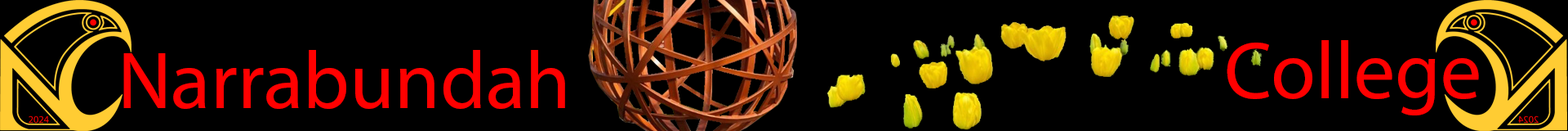
<style>
.page{position:relative;width:1568px;height:131px;background:#000000}
.page>*{position:absolute;margin:0}
.t1{font:81.7px "MyriadPro-Regular";color:#ff0000}
</style>
<div class="page">
<p class="t1" style="left:1227px;top:40px;width:252px;height:75px">College</p>
<p class="t1" style="left:123px;top:50px;width:442px;height:59px">Narrabundah</p>
</div>
